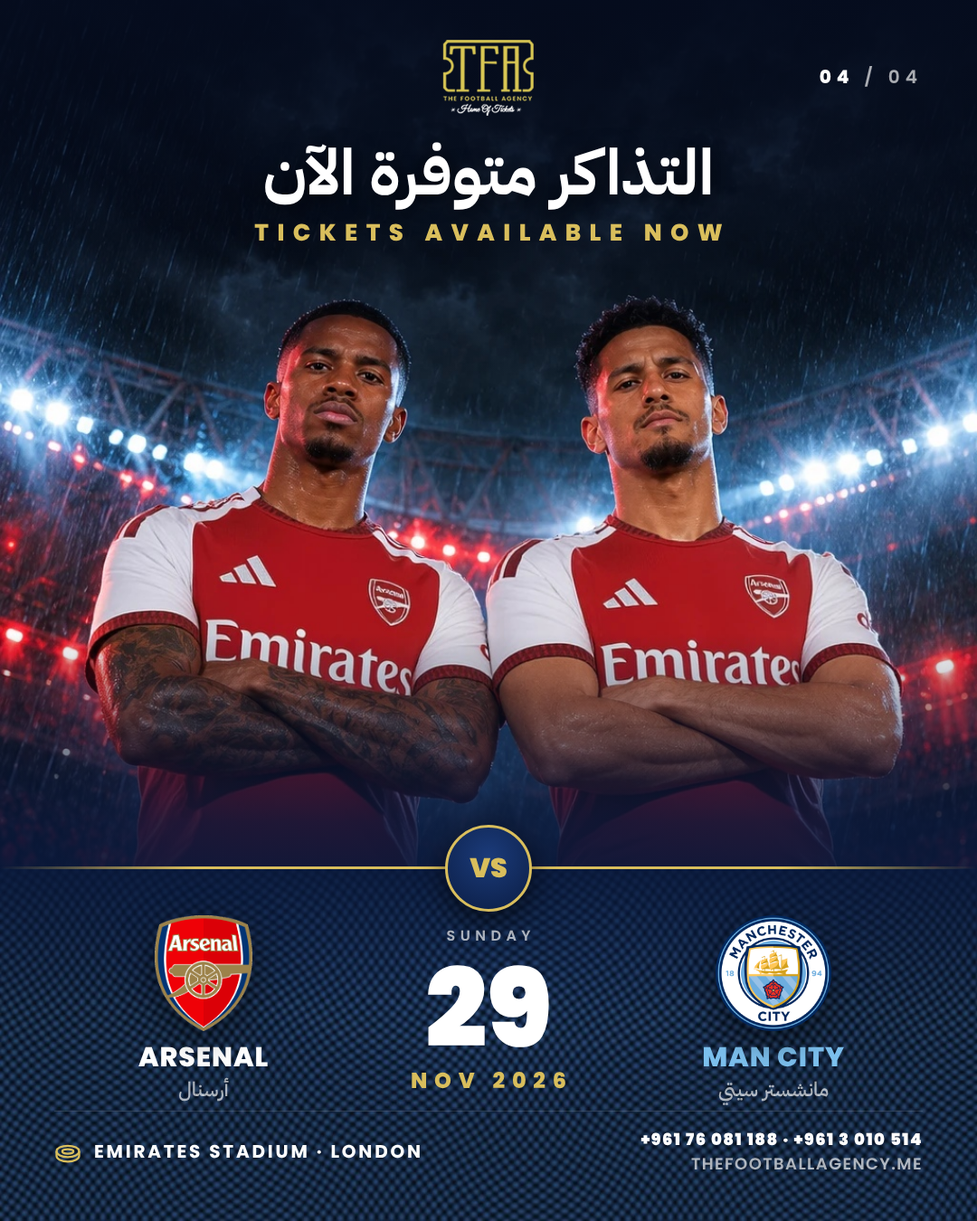
<style>
.page{position:relative;width:977px;height:1221px}
.page>*{position:absolute;margin:0}
.t1{font:18.1px "Poppins-SemiBold";letter-spacing:0.3em;color:#ffffff}
.t2{font:18.1px "Poppins-ExtraBold";letter-spacing:0.3em;color:#ffffff}
.t3{font:63.3px/76px "IBMPlexSansArabic-Bold";color:#ffffff}
.t4{font:23.5px "Poppins-ExtraBold";letter-spacing:0.36em;color:#d9be5c}
.t5{font:27.1px "Poppins-Black";color:#d9be5c}
.t6{font:14.5px "Poppins-SemiBold";letter-spacing:0.34em}
.t7{font:108.5px "Poppins-Black";color:#ffffff}
.t8{font:27.1px "Poppins-ExtraBold";letter-spacing:0.03em;color:#ffffff}
.t9{font:27.1px "Poppins-ExtraBold";letter-spacing:0.03em;color:#7cc0ee}
.t10{font:21.7px "Poppins-ExtraBold";letter-spacing:0.32em;color:#d9be5c}
.t11{font:19.9px "IBMPlexSansArabic-Medium"}
.t12{font:16.3px/24.4px "Poppins-Black";letter-spacing:0.08em;color:#ffffff}
.t13{font:16.3px/24.4px "Poppins-SemiBold";letter-spacing:0.08em;color:#ffffff}
.t14{font:18.1px "Poppins-Bold";letter-spacing:0.14em;color:#ffffff}
</style>
<div class="page">
<p class="t1" style="left:819px;top:66px;width:98px;height:21px"><span class="t2">04</span> / 04</p>
<p class="t3" style="left:240px;top:122px;width:496px;height:116px;text-align:center">التذاكر متوفرة الآن</p>
<p class="t4" style="left:254px;top:223px;width:468px;height:18px">TICKETS AVAILABLE NOW</p>
<p class="t5" style="left:469px;top:857px;width:37px;height:21px">VS</p>
<p class="t6" style="left:447px;top:930px;width:84px;height:11px">SUNDAY</p>
<p class="t7" style="left:428px;top:965px;width:121px;height:82px">29</p>
<p class="t8" style="left:138px;top:1046px;width:130px;height:21px">ARSENAL</p>
<p class="t9" style="left:703px;top:1046px;width:141px;height:21px">MAN CITY</p>
<p class="t10" style="left:411px;top:1072px;width:154px;height:17px">NOV 2026</p>
<p class="t11" style="left:179px;top:1077px;width:50px;height:25px">أرسنال</p>
<p class="t11" style="left:718px;top:1081px;width:110px;height:24px">مانشستر سيتي</p>
<p class="t12" style="left:640px;top:1132px;width:281px;height:38px;text-align:right">+961 76 081 188 · +961 3 010 514<span class="t13"><br>THEFOOTBALLAGENCY.ME</span></p>
<p class="t14" style="left:95px;top:1144px;width:325px;height:14px">EMIRATES STADIUM · LONDON</p>
</div>
